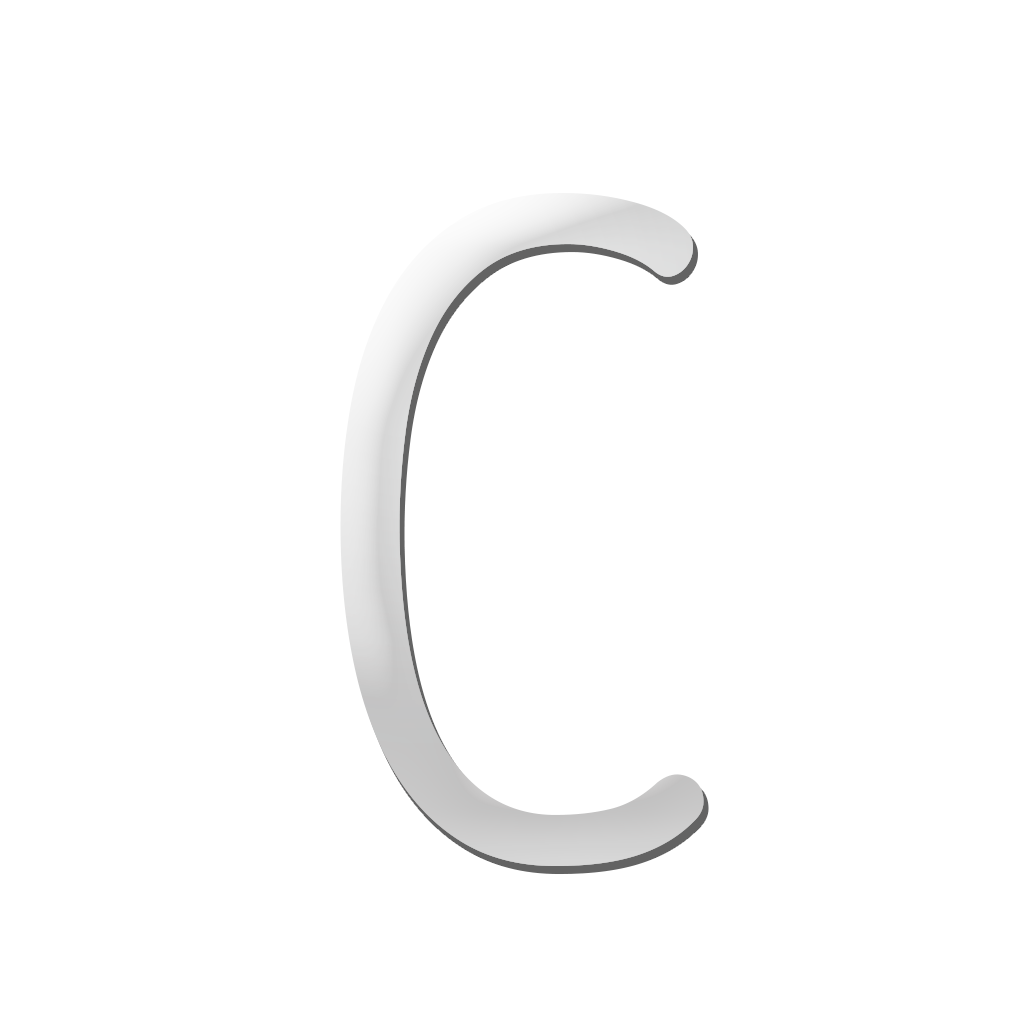
<style>
.page{position:relative;width:1024px;height:1024px;background:#ffffff}
.page>*{position:absolute;margin:0}
.t1{font:857px "NanumBarunpen";color:#d7d7d7;scale:1.07 1}
</style>
<div class="page">
<p class="t1" style="left:340px;top:193px;width:364px;height:673px">C</p>
</div>
